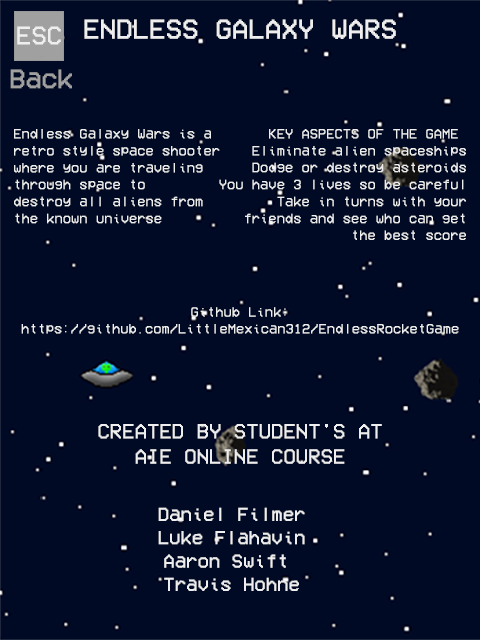
<style>
.page{position:relative;width:480px;height:640px;background:#010a25}
.page>*{position:absolute;margin:0}
.t1{font:28.2px "VCROSDMono";color:#eeeeee}
.t2{font:14.1px "VCROSDMono";color:#eeeeee}
.t3{font:21.2px "VCROSDMono";color:#eeeeee}
.t4{font:19.4px "VCROSDMono";color:#eeeeee}
</style>
<div class="page">
<p class="t1" style="left:84px;top:19px;width:312px;height:20px">ENDLESS GALAXY WARS</p>
<p class="t2" style="left:14px;top:129px;width:206px;height:95px">Endless Galaxy Wars is a <br>retro style space shooter<br>where you are traveling<br>through space to<br>destroy all aliens from<br>the known universe</p>
<p class="t2" style="left:219px;top:129px;width:247px;height:111px;text-align:right">KEY ASPECTS OF THE GAME <br>Eliminate alien spaceships<br>Dodge or destroy asteroids<br>You have 3 lives so be careful<br>Take in turns with your<br>friends and see who can get<br>the best score</p>
<p class="t2" style="left:21px;top:307px;width:438px;height:27px;text-align:center"><span class="t3"><br><br></span>Github Link:<br>https://github.com/LittleMexican312/EndlessRocketGame</p>
<p class="t3" style="left:98px;top:424px;width:284px;height:40px;text-align:center">CREATED BY STUDENT'S AT<br>AIE ONLINE COURSE</p>
<p class="t4" style="left:158px;top:507px;width:147px;height:84px;text-align:center">Daniel Filmer<br>Luke Flahavin<br>Aaron Swift <br>Travis Hohne</p>
</div>
